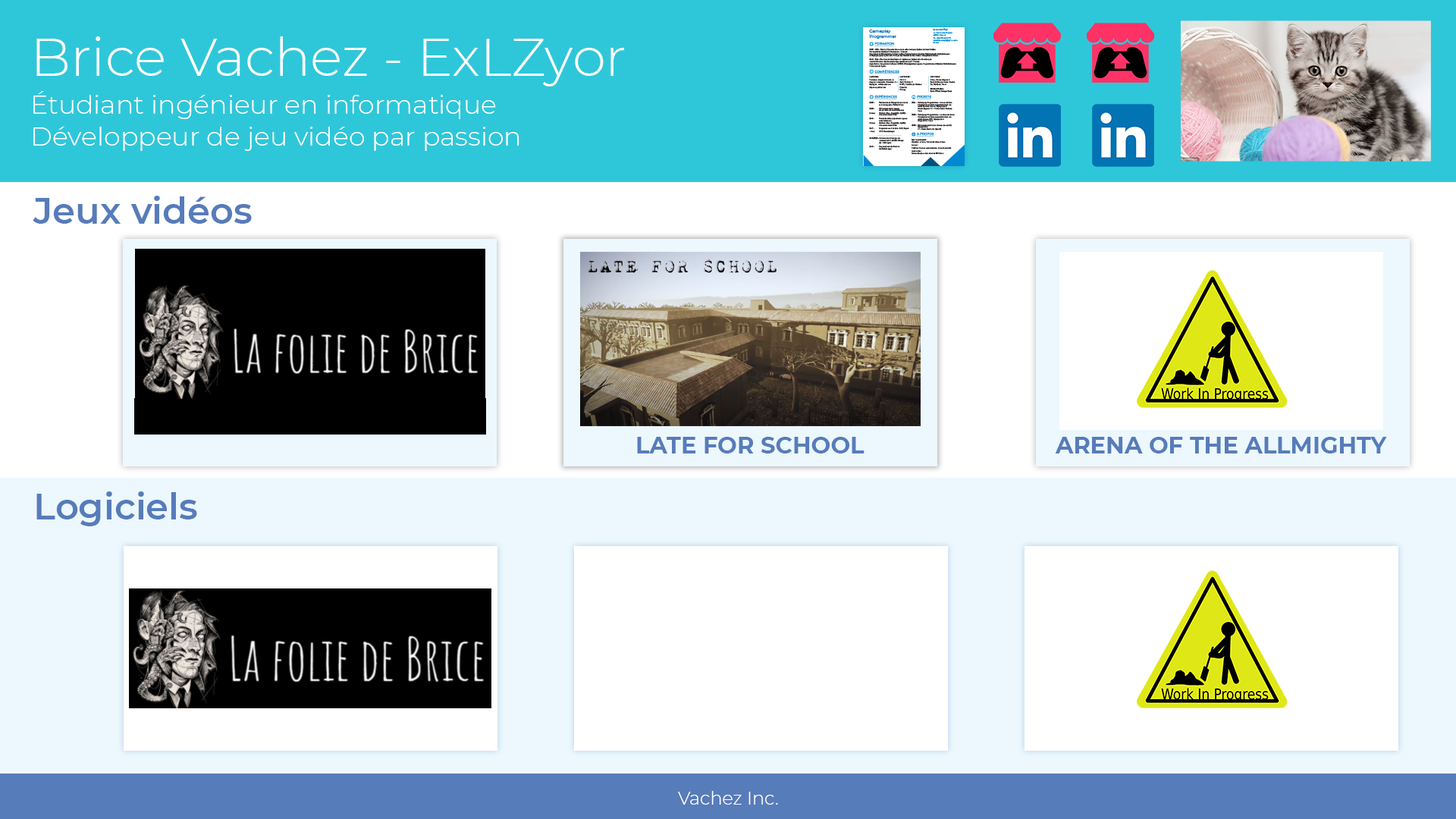
<style>
.page{position:relative;width:1456px;height:819px;background:#ffffff}
.page>*{position:absolute;margin:0}
.t1{font:53.5px "Montserrat-Light";color:#ffffff}
.t2{font:26.4px "Montserrat-Light";color:#ffffff}
.t3{font:36.4px "Montserrat-SemiBold";color:#577cba}
.t4{font:23.1px "Montserrat-Bold";color:#577cba}
.t5{font:18.2px "Montserrat-Light";color:#ffffff}
</style>
<div class="page">
<p class="t1" style="left:36px;top:36px;width:588px;height:50px">Brice Vachez - ExLZyor</p>
<p class="t2" style="left:33px;top:91px;width:486px;height:60px">Étudiant ingénieur en informatique<br>Développeur de jeu vidéo par passion</p>
<p class="t3" style="left:33px;top:196px;width:219px;height:28px">Jeux vidéos</p>
<p class="t4" style="left:637px;top:437px;width:227px;height:16px">LATE FOR SCHOOL</p>
<p class="t4" style="left:1055px;top:437px;width:332px;height:16px">ARENA OF THE ALLMIGHTY</p>
<p class="t3" style="left:36px;top:491px;width:161px;height:35px">Logiciels</p>
<p class="t5" style="left:678px;top:791px;width:100px;height:14px">Vachez Inc.</p>
</div>
